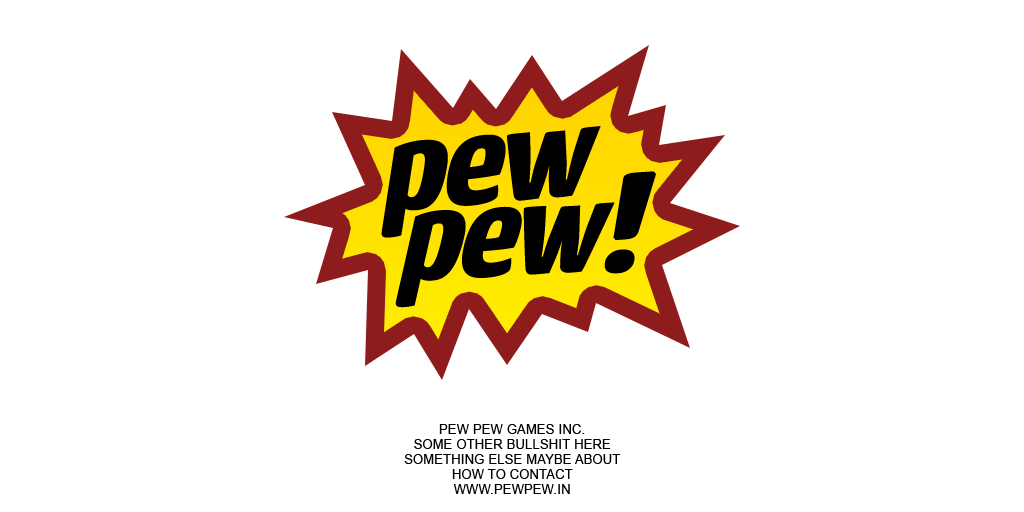
<style>
.page{position:relative;width:1024px;height:512px;background:#ffffff}
.page>*{position:absolute;margin:0}
.t1{font:132.9px "YanoneKaffeesatz-Bold";letter-spacing:-0.03em;color:#000000;font-style:italic;scale:1.36 1}
.t2{font:134.2px "YanoneKaffeesatz-Bold";letter-spacing:-0.03em;color:#000000;font-style:italic;scale:1.3 1}
.t3{font:134.2px "YanoneKaffeesatz-Bold";color:#000000;font-style:italic;scale:1.3 1}
.t4{font:134.2px "YanoneKaffeesatz-Bold";color:#000000;font-weight:bold;font-style:italic;scale:1.3 1}
.t5{font:12.5px "ArialMT";letter-spacing:0.04em;color:#000000;text-transform:uppercase}
</style>
<div class="page">
<p class="t1" style="left:381px;top:126px;width:220px;height:112px;rotate:-5deg">pew</p>
<p class="t2" style="left:395px;top:171px;width:261px;height:137px;rotate:-3deg">pe<span class="t3">w</span><span class="t4">!</span></p>
<p class="t5" style="left:404px;top:424px;width:216px;height:70px;text-align:center">pew pew games inc.<br>some other bullshit here<br>something else maybe about<br>how to contact<br>www.pewpew.in</p>
</div>
